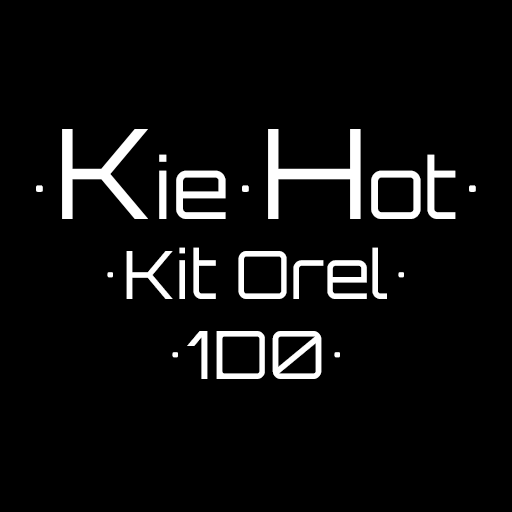
<style>
.page{position:relative;width:512px;height:512px;background:#000000}
.page>*{position:absolute;margin:0}
.t1{font:66.7px "Orbitron-Regular";color:#ffffff}
.t2{font:83.3px "Orbitron-Regular";color:#ffffff}
.t3{font:125px "Orbitron-Regular";color:#ffffff}
</style>
<div class="page">
<p class="t1" style="left:36px;top:129px;width:440px;height:250px;text-align:center"><span class="t2">•</span><span class="t3">K</span><span class="t2">ie•</span><span class="t3">H</span><span class="t2">ot•<br></span>•Kit Orel•<br>•1D0•</p>
</div>
